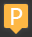
<style>
.page{position:relative;width:32px;height:37px;background:#fdb744}
.page>*{position:absolute;margin:0}
.t1{font:23px "Verdana";color:#ffffff}
</style>
<div class="page">
<p class="t1" style="left:11px;top:8px;width:12px;height:17px">P</p>
</div>
